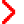
<style>
.page{position:relative;width:24px;height:24px;background:#ffffff}
.page>*{position:absolute;margin:0}
.t1{font:33.3px "VCROSDMono";color:#fe0000}
</style>
<div class="page">
<p class="t1" style="left:2px;top:0px;width:14px;height:24px">&gt;</p>
</div>
